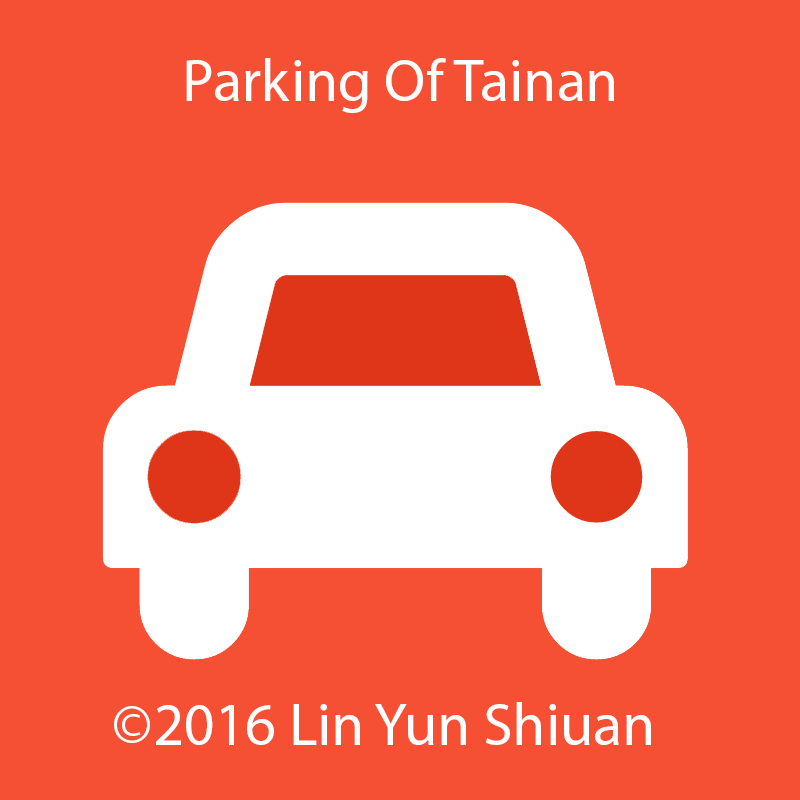
<style>
.page{position:relative;width:800px;height:800px;background:#f65034}
.page>*{position:absolute;margin:0}
.t1{font:60px "MyriadPro-Regular";color:#fefefe}
.t2{font:60px "MyriadPro-Regular";color:#ffffff}
</style>
<div class="page">
<p class="t1" style="left:186px;top:58px;width:428px;height:55px">Parking Of Tainan</p>
<p class="t2" style="left:114px;top:702px;width:537px;height:43px">©2016 Lin Yun Shiuan</p>
</div>
